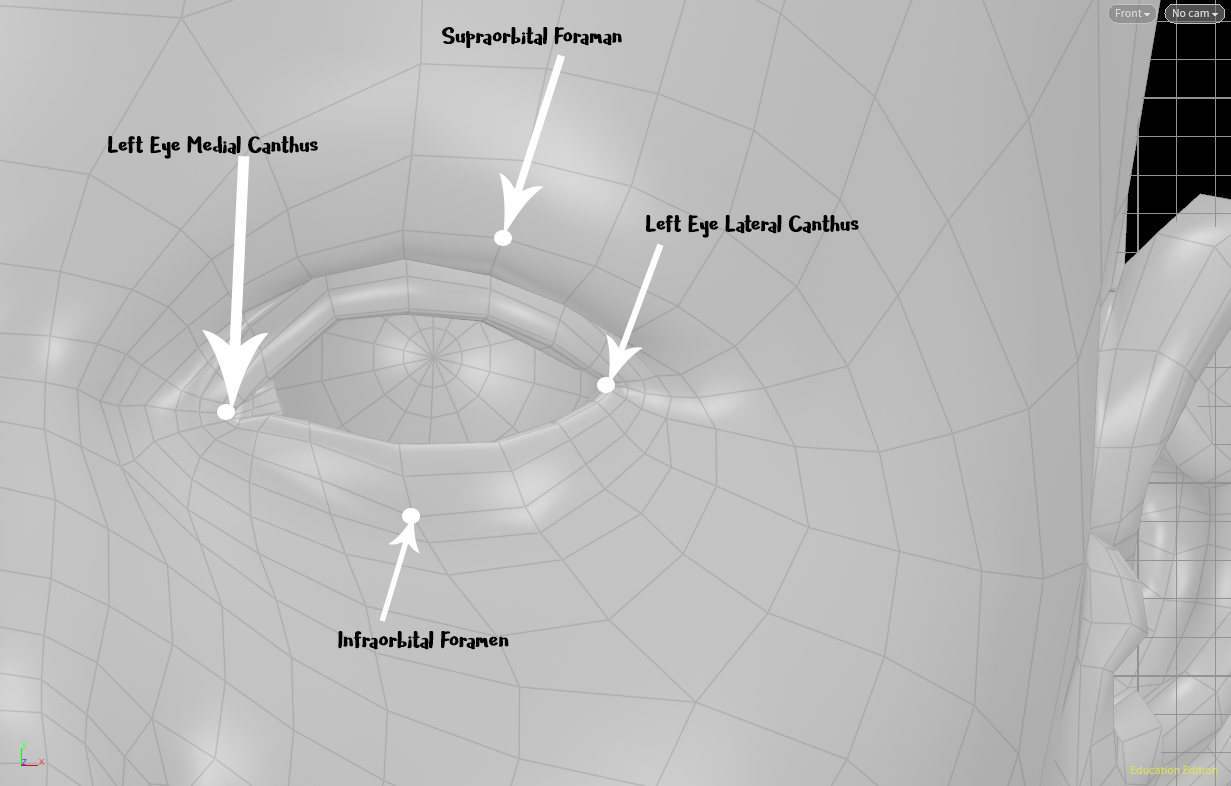
<style>
.page{position:relative;width:1231px;height:786px}
.page>*{position:absolute;margin:0}
.t1{font:24px "Cavorting-Regular";color:#000000;font-weight:bold}
</style>
<div class="page">
<p class="t1" style="left:442px;top:27px;width:180px;height:21px">Supraorbital Foraman</p>
<p class="t1" style="left:108px;top:136px;width:210px;height:23px">Left Eye Medial Canthus</p>
<p class="t1" style="left:646px;top:215px;width:213px;height:23px">Left Eye Lateral Canthus</p>
<p class="t1" style="left:338px;top:631px;width:171px;height:19px">Infraorbital Foramen</p>
</div>
